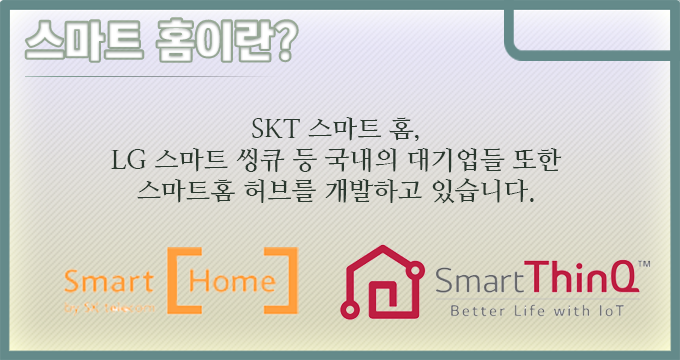
<style>
.page{position:relative;width:680px;height:360px}
.page>*{position:absolute;margin:0}
.t1{font:44px "KoreanTITGD5-R";letter-spacing:-0.01em;color:#ffffff}
.t2{font:26px "NanumMyeongjoBold";letter-spacing:-0.01em;color:#2a382e}
</style>
<div class="page">
<p class="t1" style="left:26px;top:19px;width:271px;height:42px">스마트 홈이란?</p>
<p class="t2" style="left:111px;top:117px;width:451px;height:87px;text-align:center">SKT 스마트 홈,<br>LG 스마트 씽큐 등 국내의 대기업들 또한 스마트홈 허브를 개발하고 있습니다.</p>
</div>
